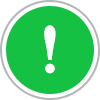
<style>
.page{position:relative;width:100px;height:100px;background:#15c142}
.page>*{position:absolute;margin:0}
.t1{font:75px "KannadaMN-Bold";letter-spacing:-0.01em;color:#ffffff}
</style>
<div class="page">
<p class="t1" style="left:44px;top:25px;width:12px;height:49px">!</p>
</div>
